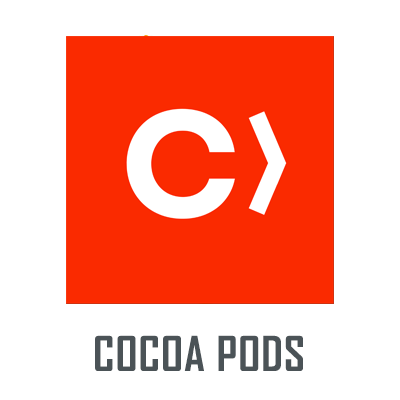
<style>
.page{position:relative;width:400px;height:400px;background:#ffffff}
.page>*{position:absolute;margin:0}
.t1{font:45.8px "AgencyFB-Bold";letter-spacing:0.025em;color:#4b5357}
</style>
<div class="page">
<p class="t1" style="left:95px;top:335px;width:208px;height:36px">COCOA PODS</p>
</div>
